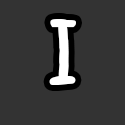
<style>
.page{position:relative;width:125px;height:125px;background:#333333}
.page>*{position:absolute;margin:0}
.t1{font:124.7px "Gaegu-Regular";color:#ffffff;scale:1.04 1}
</style>
<div class="page">
<p class="t1" style="left:49px;top:19px;width:27px;height:66px">I</p>
</div>
